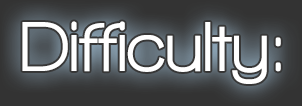
<style>
.page{position:relative;width:302px;height:106px}
.page>*{position:absolute;margin:0}
.t1{font:72px "WalkwayUltraBold";color:#ffffff}
</style>
<div class="page">
<p class="t1" style="left:22px;top:21px;width:259px;height:63px">Difficulty:</p>
</div>
